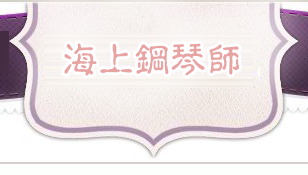
<style>
.page{position:relative;width:308px;height:175px}
.page>*{position:absolute;margin:0}
.t1{font:36px "¾­µä·±¹ÅÓ¡ Regular";color:#e8a3a3}
</style>
<div class="page">
<p class="t1" style="left:64px;top:43px;width:175px;height:33px">海上钢琴师</p>
</div>
